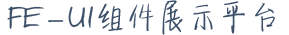
<style>
.page{position:relative;width:289px;height:35px;background:#ffffff}
.page>*{position:absolute;margin:0}
.t1{font:30.5px "SentyTEA-basic";color:#3d5069}
.t2{font:30.5px "BirchCTT";color:#3d5069}
</style>
<div class="page">
<p class="t1" style="left:7px;top:0px;width:268px;height:35px"><span class="t2">FE-UI</span>组件展示平台</p>
</div>
